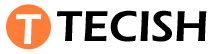
<style>
.page{position:relative;width:215px;height:54px;background:#ffffff}
.page>*{position:absolute;margin:0}
.t1{font:44.7px "ErasITC-Demi";color:#ffffff}
.t2{font:44.7px "ErasITC-Demi";color:#000000}
</style>
<div class="page">
<p class="t1" style="left:16px;top:14px;width:26px;height:30px">T</p>
<p class="t2" style="left:57px;top:10px;width:150px;height:32px">TECISH</p>
</div>
